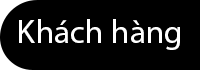
<style>
.page{position:relative;width:200px;height:70px;background:#000000}
.page>*{position:absolute;margin:0}
.t1{font:32.9px "MyriadPro-Regular";color:#fefefe}
</style>
<div class="page">
<p class="t1" style="left:19px;top:19px;width:161px;height:31px">Khách hàng</p>
</div>
